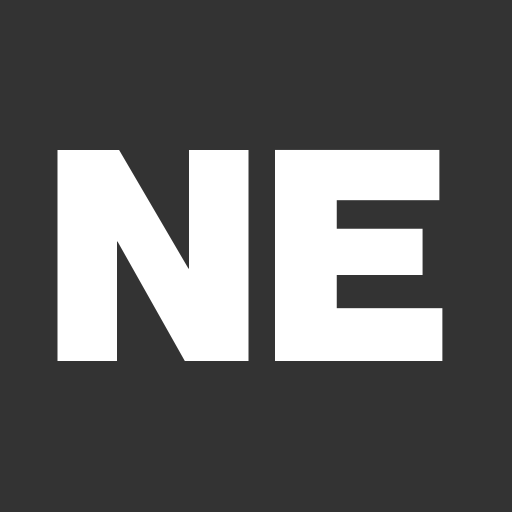
<style>
.page{position:relative;width:512px;height:512px;background:#333333}
.page>*{position:absolute;margin:0}
.t1{font:295px "NHaasGroteskDSPro-95Blk";color:#ffffff}
</style>
<div class="page">
<p class="t1" style="left:57px;top:149px;width:386px;height:212px">NE</p>
</div>
